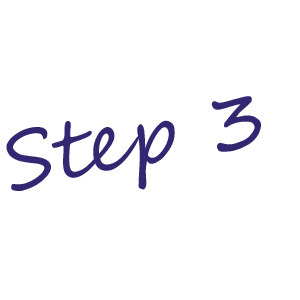
<style>
.page{position:relative;width:300px;height:300px;background:#ffffff}
.page>*{position:absolute;margin:0}
.t1{font:80px "SegoeScript";color:#322871}
</style>
<div class="page">
<p class="t1" style="left:6px;top:96px;width:255px;height:95px;rotate:-10deg">Step 3</p>
</div>
